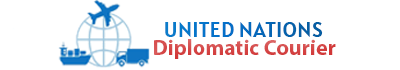
<style>
.page{position:relative;width:400px;height:70px;background:#ffffff}
.page>*{position:absolute;margin:0}
.t1{font:22.2px "Alatsi-Regular";color:#056bc1}
.t2{font:21.9px "MyriadPro-Bold";color:#d54848}
</style>
<div class="page">
<p class="t1" style="left:165px;top:22px;width:158px;height:15px">UNITED NATIONS</p>
<p class="t2" style="left:154px;top:39px;width:182px;height:20px">Diplomatic Courier</p>
</div>
